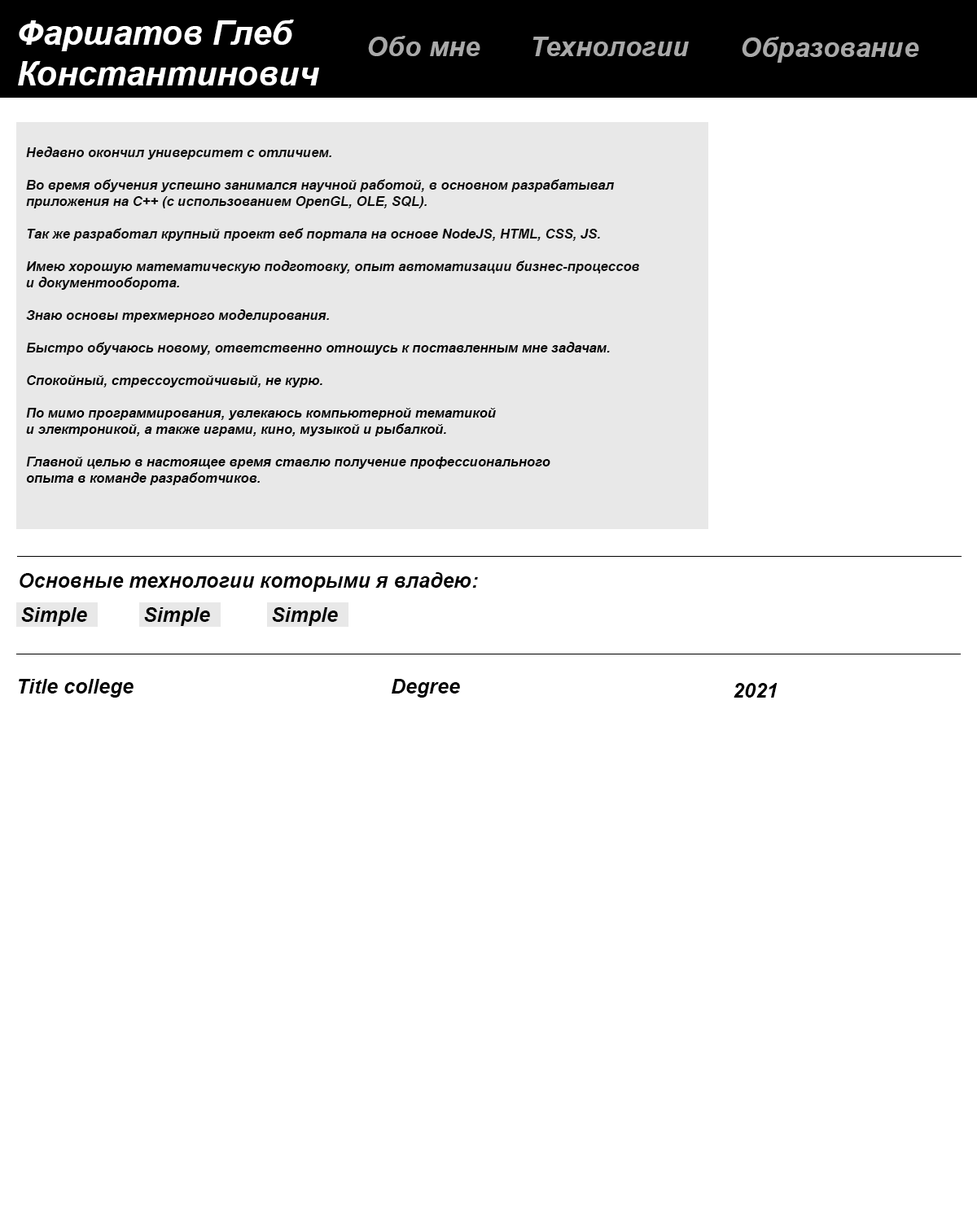
<style>
.page{position:relative;width:977px;height:1221px;background:#ffffff}
.page>*{position:absolute;margin:0}
.t1{font:33.9px "Arial-BoldItalicMT";color:#ffffff}
.t2{font:27.1px "Arial-BoldItalicMT";color:#a9a9a9}
.t3{font:13.6px "Arial-BoldItalicMT";color:#0b0b0b}
.t4{font:13.6px "Arial-BoldItalicMT";color:#000000}
.t5{font:20.3px "Arial-BoldItalicMT";color:#000000}
</style>
<div class="page">
<p class="t1" style="left:18px;top:20px;width:301px;height:65px">Фаршатов Глеб <br>Константинович</p>
<p class="t2" style="left:368px;top:36px;width:112px;height:20px">Обо мне</p>
<p class="t2" style="left:532px;top:37px;width:157px;height:19px">Технологии</p>
<p class="t2" style="left:741px;top:37px;width:178px;height:26px">Образование</p>
<p class="t3" style="left:26px;top:147px;width:613px;height:338px">Недавно окончил университет с отличием. <br><br>Во время обучения успешно занимался научной работой, в основном разрабатывал <br>приложения на С++ (с использованием OpenGL, OLE, SQL).<br><br>Так же разработал крупный проект веб портала на основе NodeJS, HTML, CSS, JS. <br><br>Имею хорошую математическую подготовку, опыт автоматизации бизнес-процессов <br>и документооборота. <br><br>Знаю основы трехмерного моделирования. <br><br>Быстро обучаюсь новому, ответственно <span class="t4">отношусь к поставленным мне задачам. <br><br>Спокойный, стрессоустойчивый, не курю. <br><br>По мимо программирования, увлекаюсь компьютерной тематикой <br>и электроникой, а также играми, кино, музыкой и рыбалкой.<br> <br>Главной целью в настоящее время ставлю получение профессионального <br>опыта в команде разработчиков.</span></p>
<p class="t5" style="left:20px;top:572px;width:458px;height:20px">Основные технологии которыми я владею:</p>
<p class="t5" style="left:21px;top:607px;width:66px;height:19px">Simple</p>
<p class="t5" style="left:144px;top:607px;width:66px;height:19px">Simple</p>
<p class="t5" style="left:272px;top:607px;width:66px;height:19px">Simple</p>
<p class="t5" style="left:19px;top:679px;width:114px;height:19px">Title college</p>
<p class="t5" style="left:391px;top:679px;width:69px;height:19px">Degree</p>
<p class="t5" style="left:733px;top:683px;width:44px;height:15px">2021</p>
</div>
